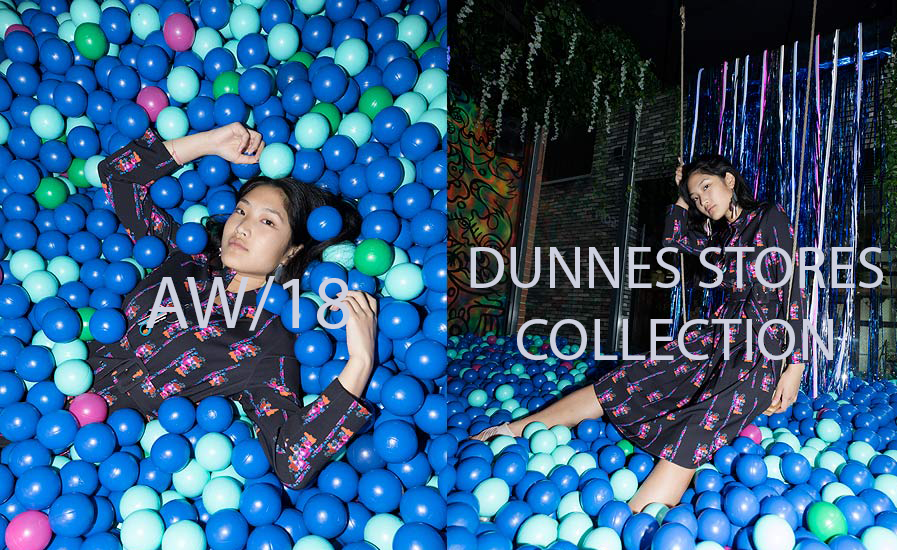
<style>
.page{position:relative;width:897px;height:550px}
.page>*{position:absolute;margin:0}
.t1{font:60px "MyriadPro-Regular";color:#cdd0df}
.t2{font:75px "MyriadPro-Regular";color:#cdd0df}
</style>
<div class="page">
<p class="t1" style="left:470px;top:247px;width:413px;height:113px;text-align:center">DUNNES STORES<br>COLLECTION</p>
<p class="t2" style="left:146px;top:276px;width:204px;height:55px">AW/18</p>
</div>
